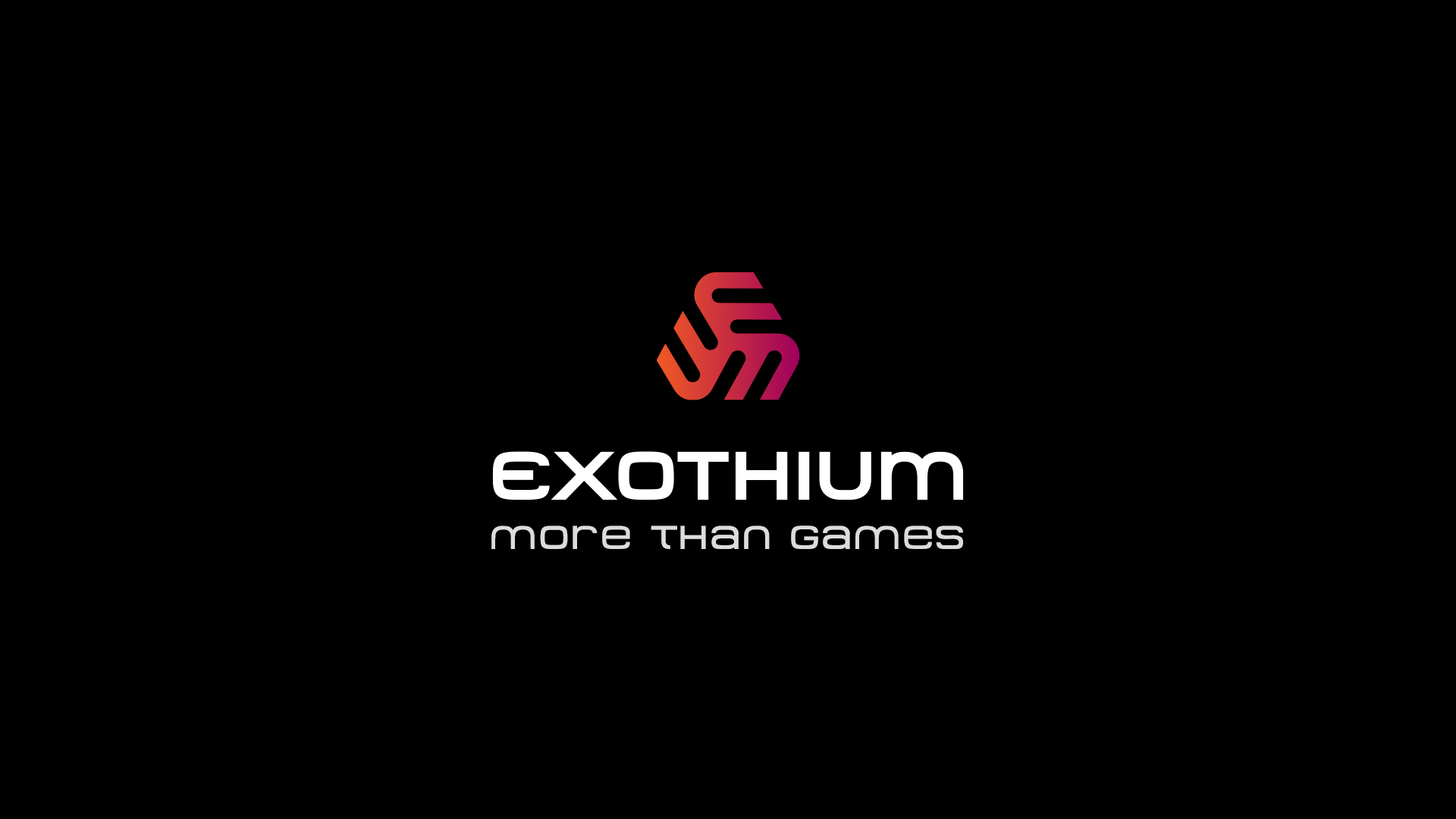
<style>
.page{position:relative;width:1456px;height:819px;background:#000000}
.page>*{position:absolute;margin:0}
.t1{font:32.6px "MetroDF";letter-spacing:0.06em;color:#dcdcdc}
</style>
<div class="page">
<p class="t1" style="left:491px;top:526px;width:472px;height:23px">more than games</p>
</div>
